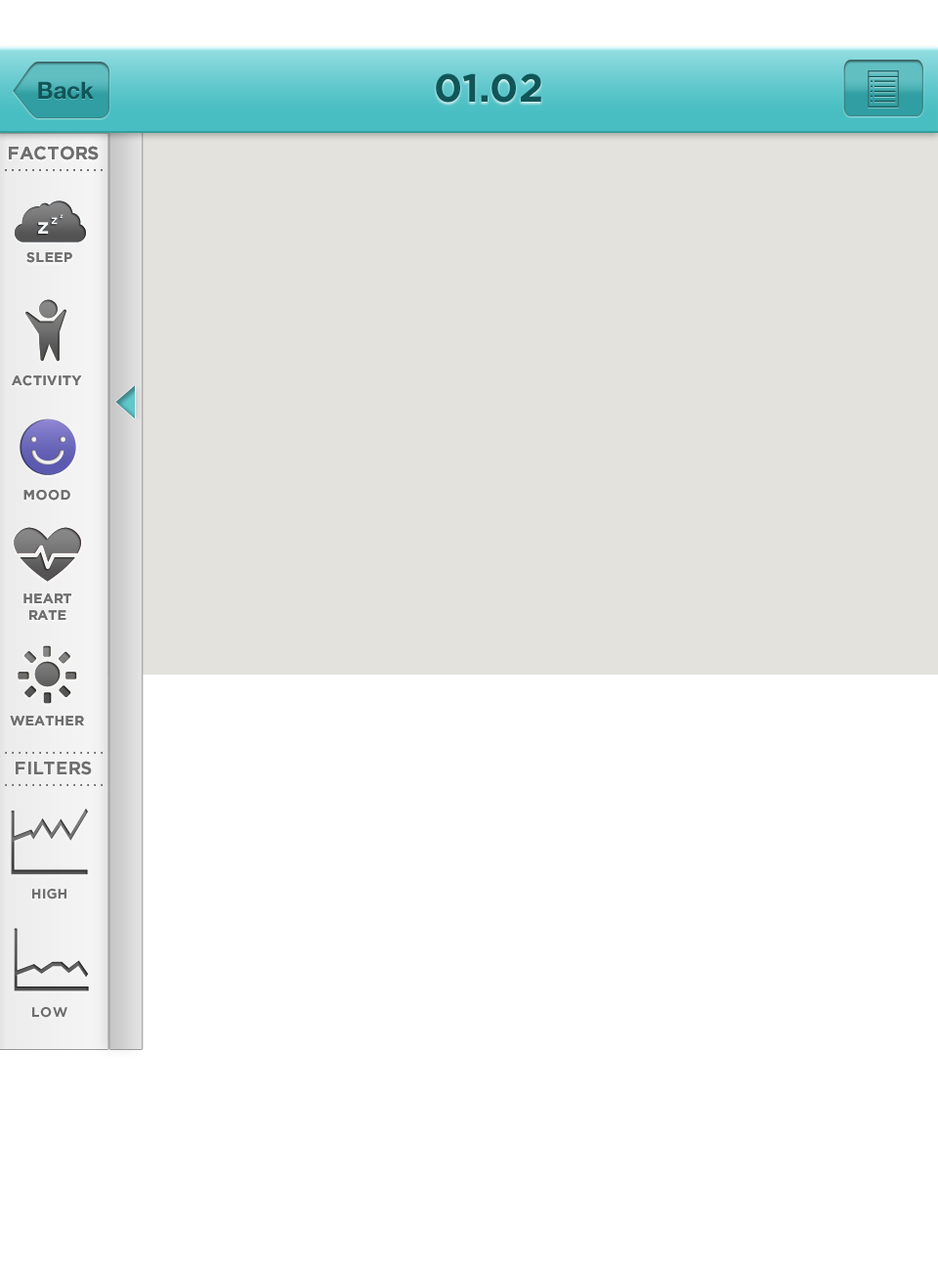
<style>
.page{position:relative;width:938px;height:1271px;background:#ffffff}
.page>*{position:absolute;margin:0}
.t1{font:39.1px "Gotham-Bold";color:#105659}
.t2{font:23.5px "HelveticaNeue-Bold";color:#105659}
.t3{font:18.1px "Gotham-Bold";color:#6f6e6e}
.t4{font:11.5px "Gotham-Bold";color:#6f6e6e}
.t5{font:13.7px "Gotham-Bold";color:#6f6e6e}
</style>
<div class="page">
<p class="t1" style="left:436px;top:73px;width:106px;height:30px">01.02</p>
<p class="t2" style="left:38px;top:81px;width:56px;height:19px">Back</p>
<p class="t3" style="left:9px;top:146px;width:90px;height:14px">FACTORS</p>
<p class="t3" style="left:9px;top:146px;width:90px;height:14px">FACTORS</p>
<p class="t4" style="left:5px;top:169px;width:98px;height:2px">. . . . . . . . . . . . . . .</p>
<p class="t4" style="left:5px;top:169px;width:98px;height:2px">. . . . . . . . . . . . . . .</p>
<p class="t5" style="left:26px;top:252px;width:46px;height:11px">SLEEP</p>
<p class="t5" style="left:26px;top:252px;width:46px;height:11px">SLEEP</p>
<p class="t5" style="left:12px;top:375px;width:70px;height:11px">ACTIVITY</p>
<p class="t5" style="left:12px;top:375px;width:70px;height:11px">ACTIVITY</p>
<p class="t5" style="left:23px;top:490px;width:47px;height:10px">MOOD</p>
<p class="t5" style="left:23px;top:490px;width:47px;height:10px">MOOD</p>
<p class="t5" style="left:23px;top:593px;width:48px;height:27px;text-align:center">HEART<br>RATE</p>
<p class="t5" style="left:23px;top:593px;width:48px;height:27px;text-align:center">HEART<br>RATE</p>
<p class="t5" style="left:10px;top:716px;width:74px;height:9px">WEATHER</p>
<p class="t5" style="left:10px;top:716px;width:74px;height:9px">WEATHER</p>
<p class="t4" style="left:5px;top:752px;width:98px;height:2px">. . . . . . . . . . . . . . .</p>
<p class="t3" style="left:16px;top:760px;width:76px;height:15px">FILTERS</p>
<p class="t4" style="left:5px;top:784px;width:98px;height:2px">. . . . . . . . . . . . . . .</p>
<p class="t5" style="left:32px;top:889px;width:34px;height:10px">HIGH</p>
<p class="t5" style="left:32px;top:1007px;width:35px;height:11px">LOW</p>
</div>
